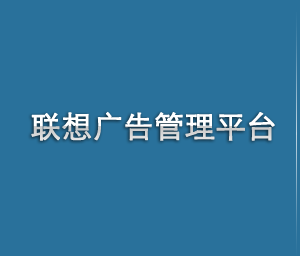
<style>
.page{position:relative;width:300px;height:256px;background:#29719b}
.page>*{position:absolute;margin:0}
.t1{font:30px "STXihei";color:#f7f7f7;font-weight:bold}
</style>
<div class="page">
<p class="t1" style="left:31px;top:111px;width:244px;height:30px">联想广告管理平台</p>
</div>
